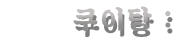
<style>
.page{position:relative;width:174px;height:40px;background:#ffffff}
.page>*{position:absolute;margin:0}
.t1{font:26.9px "SDKukdetopokki-bBd";letter-spacing:0.08em}
</style>
<div class="page">
<p class="t1" style="left:73px;top:6px;width:98px;height:26px">쿠이탕 :</p>
</div>
